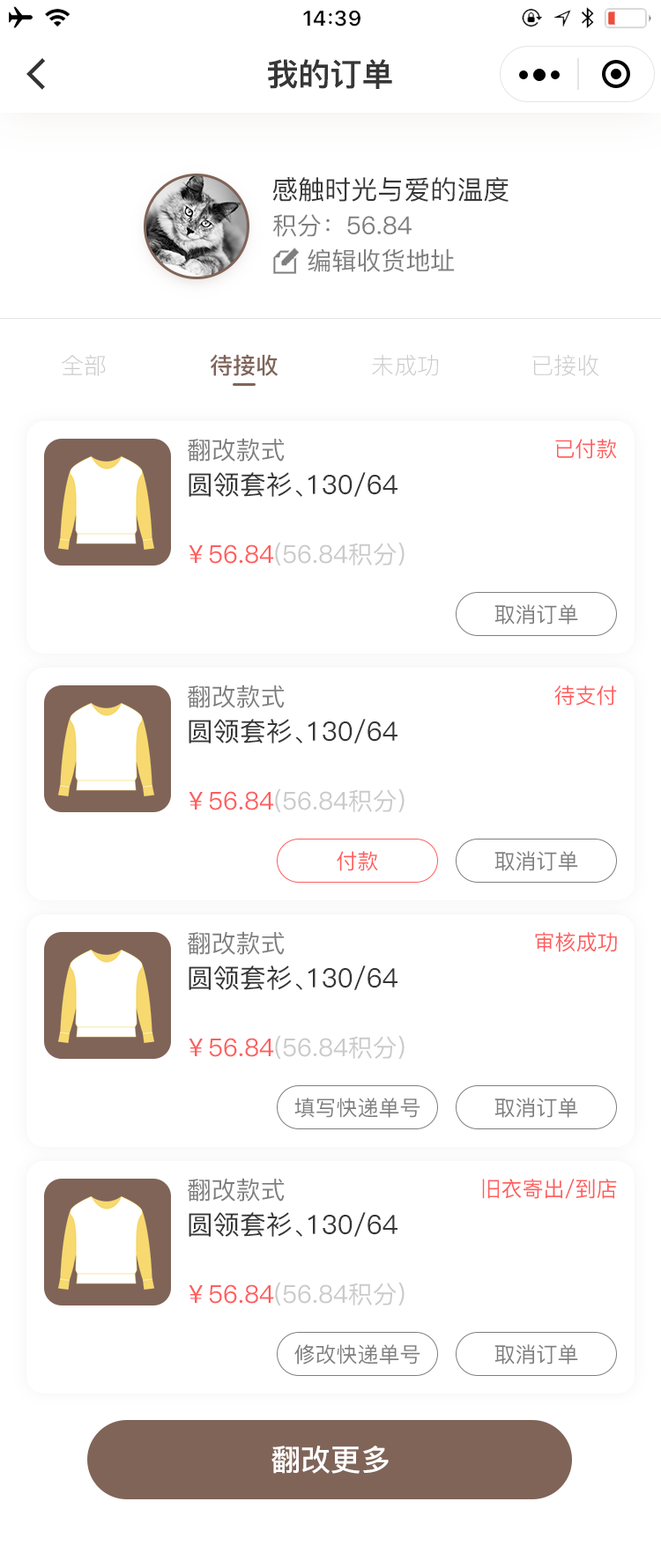
<style>
.page{position:relative;width:661px;height:1568px;background:#ffffff}
.page>*{position:absolute;margin:0}
.t1{font:31.7px "PingFang-SC-Heavy";color:#363636}
.t2{font:26.4px "PingFang-SC-Medium";color:#363636}
.t3{font:24.7px "PingFang-SC-Medium";color:#7e7e7e}
.t4{font:22.9px "PingFang-SC-Light";color:#cacaca}
.t5{font:22.9px "PingFang-SC-Bold";color:#806458}
.t6{font:21.1px "PingFang-SC-Medium";color:#ff5d5d}
.t7{font:24.7px "PingFang-SC-Medium";color:#cacaca}
.t8{font:24.7px "PingFang-SC-Medium";color:#ff5d5d}
.t9{font:21.1px "PingFang-SC-Medium";color:#7e7e7e}
.t10{font:30px "PingFang-SC-Bold";color:#ffffff}
</style>
<div class="page">
<p class="t1" style="left:268px;top:59px;width:124px;height:30px">我的订单</p>
<p class="t2" style="left:272px;top:177px;width:236px;height:25px">感触时光与爱的温度</p>
<p class="t3" style="left:273px;top:214px;width:138px;height:23px">积分：56.84</p>
<p class="t3" style="left:307px;top:248px;width:147px;height:24px">编辑收货地址</p>
<p class="t4" style="left:62px;top:354px;width:44px;height:22px">全部</p>
<p class="t5" style="left:211px;top:354px;width:66px;height:22px">待接收</p>
<p class="t4" style="left:372px;top:354px;width:66px;height:22px">未成功</p>
<p class="t4" style="left:532px;top:354px;width:67px;height:22px">已接收</p>
<p class="t3" style="left:188px;top:438px;width:97px;height:24px">翻改款式</p>
<p class="t6" style="left:555px;top:439px;width:62px;height:20px">已付款</p>
<p class="t2" style="left:189px;top:472px;width:208px;height:25px">圆领套衫、130/64</p>
<p class="t7" style="left:189px;top:542px;width:215px;height:24px"><span class="t8">￥56.84</span>(56.84积分)</p>
<p class="t9" style="left:494px;top:604px;width:84px;height:21px">取消订单</p>
<p class="t3" style="left:188px;top:684px;width:97px;height:24px">翻改款式</p>
<p class="t6" style="left:554px;top:685px;width:63px;height:21px">待支付</p>
<p class="t2" style="left:189px;top:719px;width:208px;height:24px">圆领套衫、130/64</p>
<p class="t7" style="left:189px;top:788px;width:215px;height:24px"><span class="t8">￥56.84</span>(56.84积分)</p>
<p class="t6" style="left:337px;top:851px;width:41px;height:20px">付款</p>
<p class="t9" style="left:494px;top:851px;width:84px;height:20px">取消订单</p>
<p class="t3" style="left:188px;top:931px;width:97px;height:24px">翻改款式</p>
<p class="t6" style="left:535px;top:932px;width:82px;height:20px">审核成功</p>
<p class="t2" style="left:189px;top:965px;width:208px;height:25px">圆领套衫、130/64</p>
<p class="t7" style="left:189px;top:1035px;width:215px;height:24px"><span class="t8">￥56.84</span>(56.84积分)</p>
<p class="t9" style="left:294px;top:1098px;width:126px;height:20px">填写快递单号</p>
<p class="t9" style="left:494px;top:1098px;width:84px;height:20px">取消订单</p>
<p class="t3" style="left:188px;top:1178px;width:97px;height:24px">翻改款式</p>
<p class="t6" style="left:482px;top:1179px;width:135px;height:20px">旧衣寄出/到店</p>
<p class="t2" style="left:189px;top:1212px;width:208px;height:25px">圆领套衫、130/64</p>
<p class="t7" style="left:189px;top:1282px;width:215px;height:23px"><span class="t8">￥56.84</span>(56.84积分)</p>
<p class="t9" style="left:294px;top:1344px;width:126px;height:21px">修改快递单号</p>
<p class="t9" style="left:494px;top:1344px;width:84px;height:21px">取消订单</p>
<p class="t10" style="left:271px;top:1446px;width:117px;height:28px">翻改更多</p>
</div>
